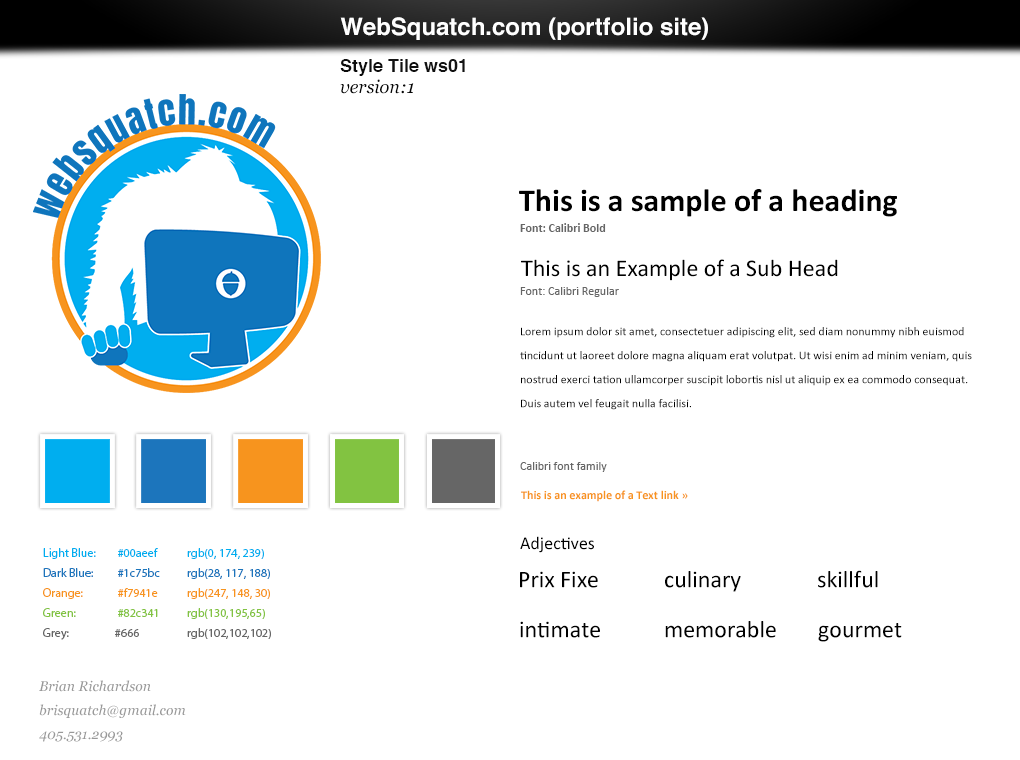
<style>
.page{position:relative;width:1020px;height:760px;background:#ffffff}
.page>*{position:absolute;margin:0}
.t1{font:24px "Helvetica-Bold";color:#ffffff}
.t2{font:18px "Helvetica-Bold";color:#000000}
.t3{font:18px "Georgia-Italic";color:#000000}
.t4{font:32px "Calibri-Bold";color:#000000}
.t5{font:12px "Calibri-Bold";color:#666666}
.t6{font:24px "Calibri";color:#000000}
.t7{font:12px "Calibri";color:#666666}
.t8{font:12px/24px "Calibri";color:#000000}
.t9{font:12px "Calibri-Bold";color:#f7941e}
.t10{font:18px "Calibri";color:#000000}
.t11{font:12px/20px "MyriadPro-Regular";color:#1b75bc}
.t12{font:12px/20px "MyriadPro-Regular";color:#00aeef}
.t13{font:12px/20px "MyriadPro-Regular";color:#f7941d}
.t14{font:12px/20px "MyriadPro-Regular";color:#82c341}
.t15{font:12px/20px "MyriadPro-Regular";color:#666666}
.t16{font:14px/24px "Georgia-Italic";color:#999999}
</style>
<div class="page">
<p class="t1" style="left:340px;top:17px;width:368px;height:23px">WebSquatch.com (portfolio site)</p>
<p class="t2" style="left:340px;top:59px;width:125px;height:17px">Style Tile ws01</p>
<p class="t3" style="left:340px;top:79px;width:74px;height:15px">version:1</p>
<p class="t4" style="left:519px;top:189px;width:378px;height:28px">This is a sample of a heading</p>
<p class="t5" style="left:520px;top:223px;width:86px;height:9px">Font: Calibri Bold</p>
<p class="t6" style="left:521px;top:259px;width:317px;height:22px">This is an Example of a Sub Head</p>
<p class="t7" style="left:520px;top:287px;width:99px;height:10px">Font: Calibri Regular</p>
<p class="t8" style="left:520px;top:327px;width:452px;height:83px">Lorem ipsum dolor sit amet, consectetuer adipiscing elit, sed diam nonummy nibh euismod tincidunt ut laoreet dolore magna aliquam erat volutpat. Ut wisi enim ad minim veniam, quis nostrud exerci tation ullamcorper suscipit lobortis nisl ut aliquip ex ea commodo consequat. Duis autem vel feugait nulla facilisi.</p>
<p class="t7" style="left:520px;top:462px;width:87px;height:10px">Calibri font family</p>
<p class="t9" style="left:521px;top:490px;width:167px;height:12px">This is an example of a Text link »</p>
<p class="t10" style="left:520px;top:536px;width:74px;height:17px">Adjectives</p>
<p class="t11" style="left:43px;top:548px;width:228px;height:92px"><span class="t12">Light Blue:  #00aeef rgb(0, 174, 239)<br></span>Dark Blue:   #1c75bc rgb(28, 117, 188)<br><span class="t13">Orange:  #f7941e rgb(247, 148, 30)<br></span><span class="t14">Green:    #82c341 rgb(130,195,65)<br></span><span class="t15">Grey:  #666  rgb(102,102,102)</span></p>
<p class="t6" style="left:520px;top:571px;width:78px;height:17px">Prix Fixe</p>
<p class="t6" style="left:665px;top:571px;width:76px;height:21px">culinary</p>
<p class="t6" style="left:818px;top:570px;width:60px;height:18px">skillful</p>
<p class="t6" style="left:520px;top:621px;width:80px;height:17px">intimate</p>
<p class="t6" style="left:665px;top:621px;width:111px;height:17px">memorable</p>
<p class="t6" style="left:818px;top:623px;width:84px;height:19px">gourmet</p>
<p class="t16" style="left:39px;top:680px;width:147px;height:62px">Brian Richardson<br>brisquatch@gmail.com<br>405.531.2993</p>
</div>
